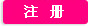
<style>
.page{position:relative;width:88px;height:27px;background:#ff0080}
.page>*{position:absolute;margin:0}
.t1{font:14px "SimSun";letter-spacing:0.1em;color:#ffffff;font-weight:bold}
</style>
<div class="page">
<p class="t1" style="left:24px;top:5px;width:40px;height:13px">注 册</p>
</div>
